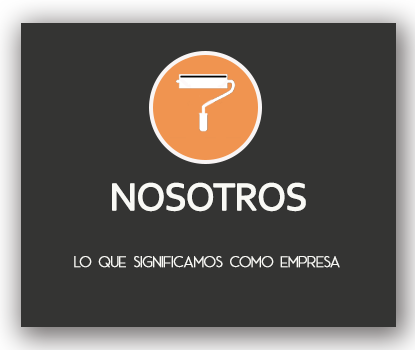
<style>
.page{position:relative;width:415px;height:350px;background:#343433}
.page>*{position:absolute;margin:0}
.t1{font:40px "Corbel";letter-spacing:-0.05em;color:#f9f9f5;font-weight:bold}
.t2{font:16px "AceSansDemo";letter-spacing:-0.05em;color:#f9f9f5;font-weight:bold}
</style>
<div class="page">
<p class="t1" style="left:112px;top:182px;width:194px;height:30px">NOSOTROS</p>
<p class="t2" style="left:74px;top:256px;width:266px;height:12px">LO QUE SIGNIFICAMOS COMO EMPRESA</p>
</div>
